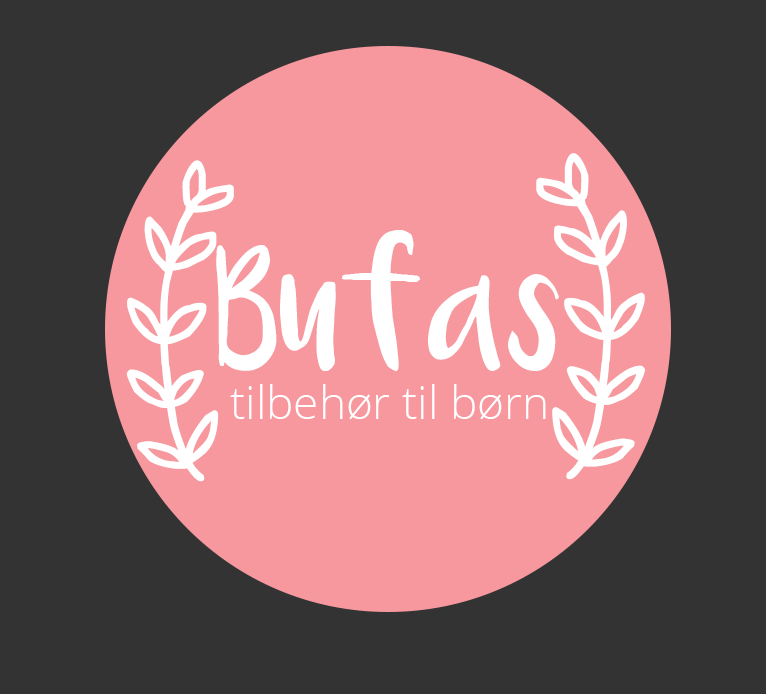
<style>
.page{position:relative;width:766px;height:694px;background:#333333}
.page>*{position:absolute;margin:0}
.t1{font:308.6px "PaperDaisyDEMO";color:#ffffff}
.t2{font:313.8px "PaperDaisyDEMO";color:#ffffff}
.t3{font:93.8px "Luna";color:#ffffff}
.t4{font:45.8px "OpenSans-Light";color:#ffffff}
</style>
<div class="page">
<p class="t1" style="left:126px;top:160px;width:108px;height:322px">[</p>
<p class="t2" style="left:536px;top:153px;width:110px;height:327px">]</p>
<p class="t3" style="left:216px;top:230px;width:343px;height:141px">Bufas</p>
<p class="t4" style="left:230px;top:384px;width:316px;height:36px">tilbehør til børn</p>
</div>
